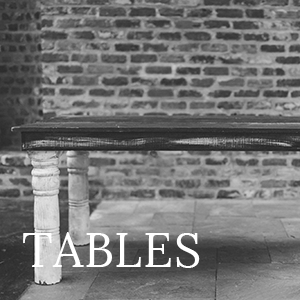
<style>
.page{position:relative;width:300px;height:300px}
.page>*{position:absolute;margin:0}
.t1{font:47.6px "Lora-Regular";letter-spacing:0.025em;color:#ffffff}
</style>
<div class="page">
<p class="t1" style="left:23px;top:232px;width:177px;height:36px">TABLES</p>
</div>
